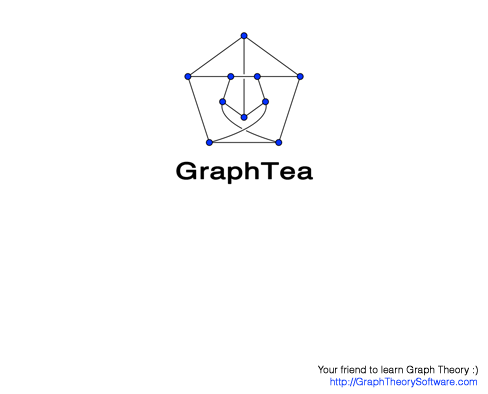
<style>
.page{position:relative;width:488px;height:394px;background:#ffffff}
.page>*{position:absolute;margin:0}
.t1{font:10px "Helvetica-Light";letter-spacing:-0.02em;color:#000000;font-weight:bold}
.t2{font:10px "Helvetica-Light";letter-spacing:-0.02em;color:#0433ff;font-weight:bold}
</style>
<div class="page">
<p class="t1" style="left:318px;top:365px;width:160px;height:11px">Your friend to learn Graph Theory :)</p>
<p class="t2" style="left:330px;top:377px;width:147px;height:11px">http://GraphTheorySoftware.com</p>
</div>
